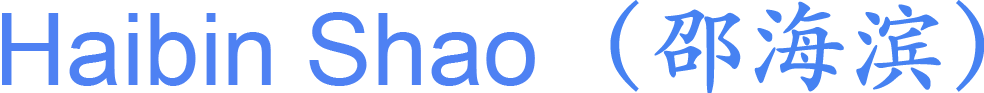
<style>
.page{position:relative;width:984px;height:93px;background:#ffffff}
.page>*{position:absolute;margin:0}
.t1{font:100px "STKaitiTC-Bold";color:#4682f2}
.t2{font:100px "ArialMT";color:#4e81f3}
</style>
<div class="page">
<p class="t1" style="left:610px;top:0px;width:375px;height:95px">（邵海滨）</p>
<p class="t2" style="left:2px;top:12px;width:533px;height:74px">Haibin Shao</p>
</div>
